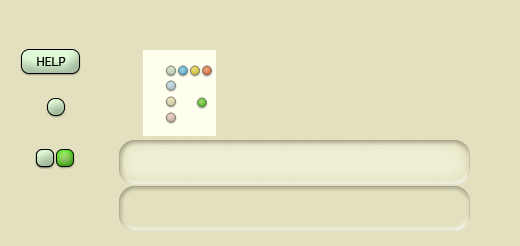
<style>
.page{position:relative;width:520px;height:246px;background:#e2e0be}
.page>*{position:absolute;margin:0}
.t1{font:12px "Geneva";color:#000000}
</style>
<div class="page">
<p class="t1" style="left:37px;top:57px;width:29px;height:9px">HELP</p>
</div>
